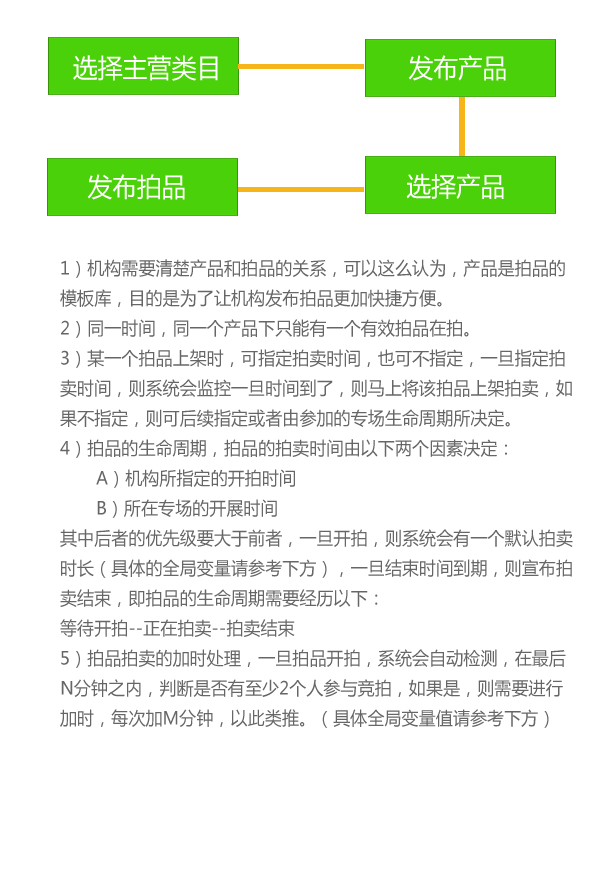
<style>
.page{position:relative;width:600px;height:873px;background:#ffffff}
.page>*{position:absolute;margin:0}
.t1{font:26px "MicrosoftYaHei";color:#ffffff;scale:0.95 1}
.t2{font:18px/30px "MicrosoftYaHei";color:#666666;scale:0.95 1}
</style>
<div class="page">
<p class="t1" style="left:73px;top:55px;width:145px;height:26px">选择主营类目</p>
<p class="t1" style="left:408px;top:55px;width:98px;height:26px">发布产品</p>
<p class="t1" style="left:87px;top:174px;width:98px;height:26px">发布拍品</p>
<p class="t1" style="left:406px;top:173px;width:98px;height:26px">选择产品</p>
<p class="t2" style="left:60px;top:259px;width:513px;height:469px">1）机构需要清楚产品和拍品的关系，可以这么认为，产品是拍品的<br>模板库，目的是为了让机构发布拍品更加快捷方便。<br>2）同一时间，同一个产品下只能有一个有效拍品在拍。<br>3）某一个拍品上架时，可指定拍卖时间，也可不指定，一旦指定拍<br>卖时间，则系统会监控一旦时间到了，则马上将该拍品上架拍卖，如<br>果不指定，则可后续指定或者由参加的专场生命周期所决定。<br>4）拍品的生命周期，拍品的拍卖时间由以下两个因素决定：<br> A）机构所指定的开拍时间<br> B）所在专场的开展时间<br>其中后者的优先级要大于前者，一旦开拍，则系统会有一个默认拍卖<br>时长（具体的全局变量请参考下方），一旦结束时间到期，则宣布拍<br>卖结束，即拍品的生命周期需要经历以下：<br>等待开拍--正在拍卖--拍卖结束<br>5）拍品拍卖的加时处理，一旦拍品开拍，系统会自动检测，在最后<br>N分钟之内，判断是否有至少2个人参与竞拍，如果是，则需要进行<br>加时，每次加M分钟，以此类推。（具体全局变量值请参考下方）</p>
</div>
